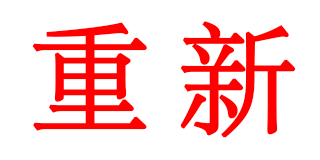
<style>
.page{position:relative;width:320px;height:160px;background:#ffffff}
.page>*{position:absolute;margin:0}
.t1{font:120px "AdobeSongStd-Light";letter-spacing:0.2em;color:#ff0000;font-weight:bold}
</style>
<div class="page">
<p class="t1" style="left:32px;top:21px;width:264px;height:117px">重新</p>
</div>
